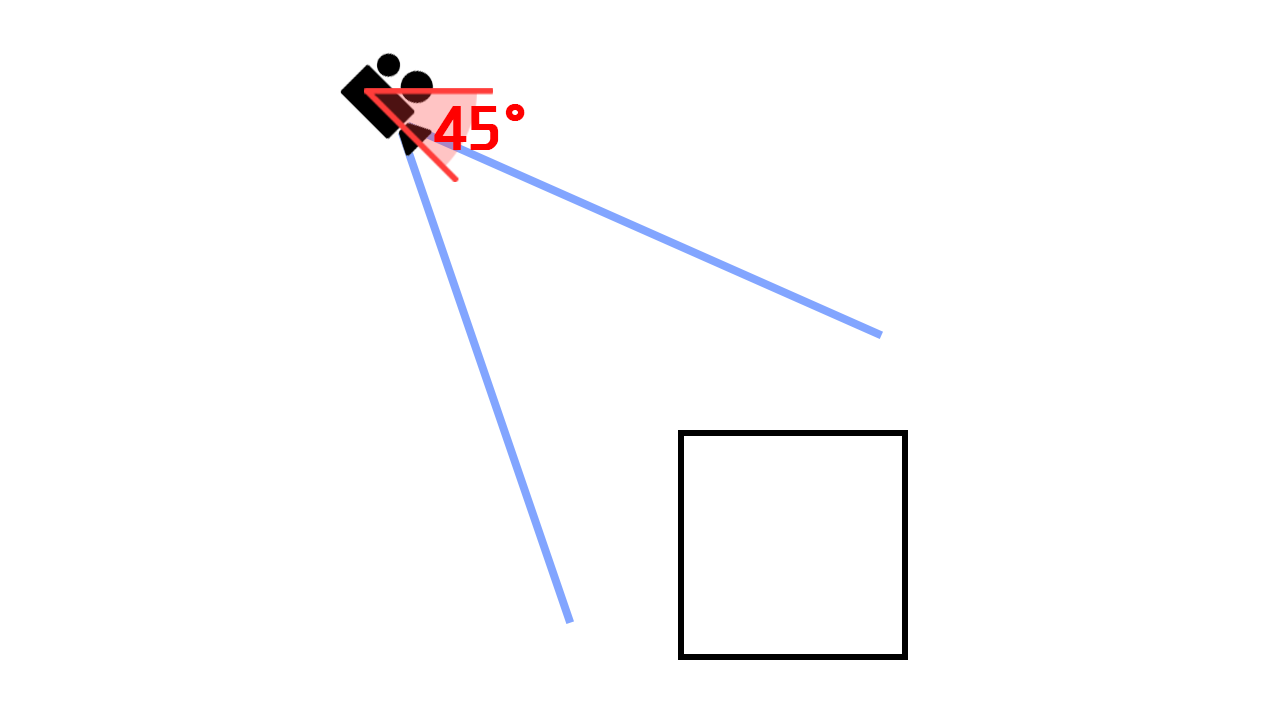
<style>
.page{position:relative;width:1280px;height:720px;background:#ffffff}
.page>*{position:absolute;margin:0}
.t1{font:60px "NEXONFootballGothicL";color:#ff0000;font-weight:bold}
</style>
<div class="page">
<p class="t1" style="left:434px;top:104px;width:91px;height:46px">45°</p>
</div>
